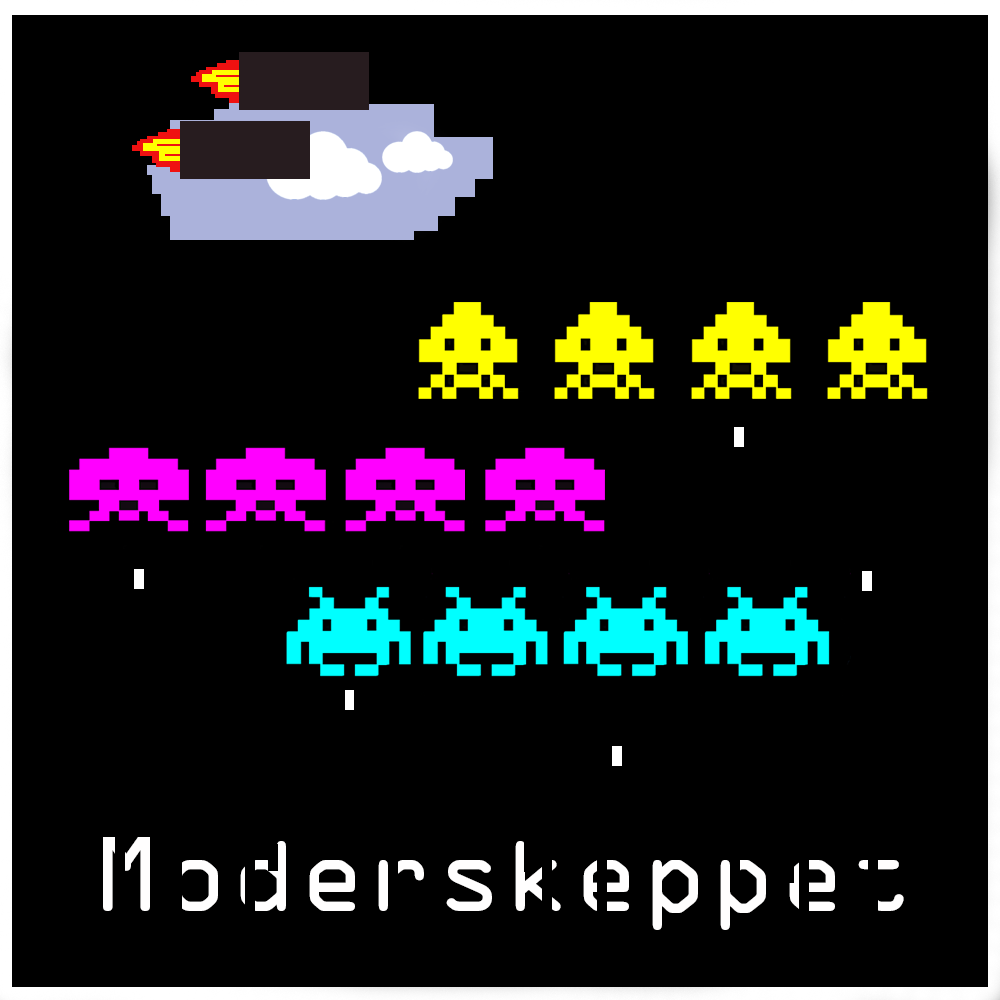
<style>
.page{position:relative;width:1000px;height:1000px;background:#000000}
.page>*{position:absolute;margin:0}
.t1{font:95.2px "OCRAStd";color:#fffefe}
</style>
<div class="page">
<p class="t1" style="left:103px;top:837px;width:801px;height:93px">Moderskeppet</p>
</div>
